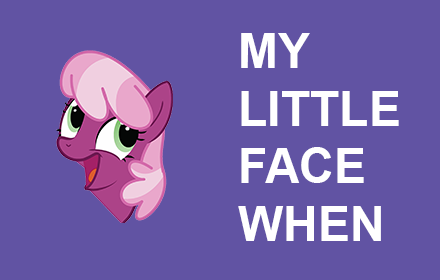
<style>
.page{position:relative;width:440px;height:280px;background:#6153a3}
.page>*{position:absolute;margin:0}
.t1{font:48px "Arial-BoldMT";color:#ffffff}
</style>
<div class="page">
<p class="t1" style="left:238px;top:33px;width:161px;height:208px">MY<br>LITTLE<br>FACE<br>WHEN</p>
</div>
